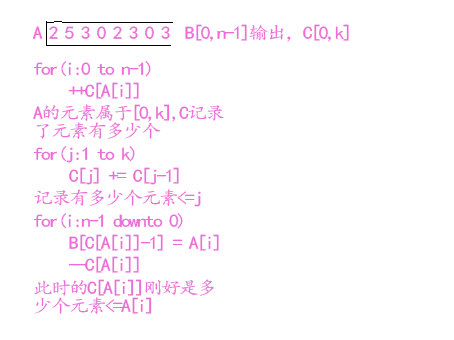
<style>
.page{position:relative;width:454px;height:340px;background:#ffffff}
.page>*{position:absolute;margin:0}
.t1{font:17.8px "¿¬Ìå";letter-spacing:-0.1em;color:#ec6cd8;scale:1.12 1}
.t2{font:17.8px/18px "¿¬Ìå";letter-spacing:-0.1em;color:#ec6cd8;scale:1.12 1}
</style>
<div class="page">
<p class="t1" style="left:32px;top:24px;width:317px;height:18px">A 2 5 3 0 2 3 0 3  B[0,n-1]输出，C[0,k]</p>
<p class="t2" style="left:33px;top:61px;width:191px;height:253px">for(i:0 to n-1)<br> ++C[A[i]]<br>A的元素属于[0,k],C记录了元素有多少个<br>for(j:1 to k)<br> C[j] += C[j-1]<br>记录有多少个元素&lt;=j<br>for(i:n-1 downto 0)<br> B[C[A[i]]-1] = A[i]<br> --C[A[i]]<br>此时的C[A[i]]刚好是多少个元素&lt;=A[i]</p>
</div>
